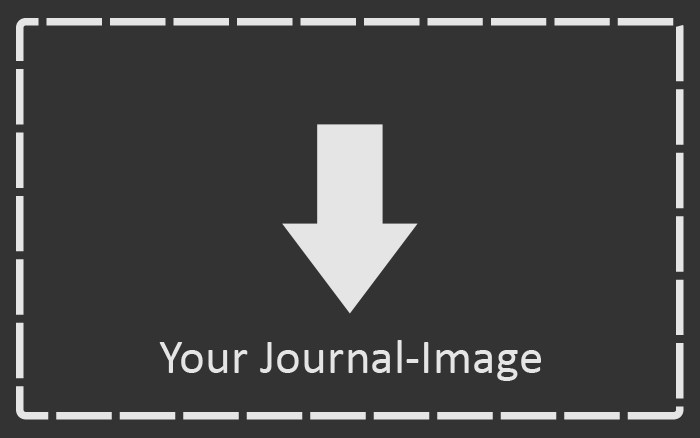
<style>
.page{position:relative;width:700px;height:438px;background:#333333}
.page>*{position:absolute;margin:0}
.t1{font:49.3px "Calibri";color:#e5e5e5}
</style>
<div class="page">
<p class="t1" style="left:159px;top:340px;width:382px;height:41px">Your Journal-Image</p>
</div>
